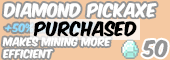
<style>
.page{position:relative;width:170px;height:60px;background:#f5c9a2}
.page>*{position:absolute;margin:0}
.t1{font:16px "KomikaAxis";color:#ffffff}
.t2{font:17px "KomikaAxis";color:#000000}
.t3{font:10px "KomikaAxis";color:#ffffff}
.t4{font:20.1px "KomikaAxis";color:#949494}
</style>
<div class="page">
<p class="t1" style="left:3px;top:3px;width:154px;height:15px">DIAMOND PICKAXE</p>
<p class="t2" style="left:33px;top:20px;width:104px;height:17px">purchased</p>
<p class="t3" style="left:2px;top:37px;width:109px;height:22px">Makes mining more<br>efficient</p>
<p class="t4" style="left:142px;top:39px;width:26px;height:19px">50</p>
</div>
